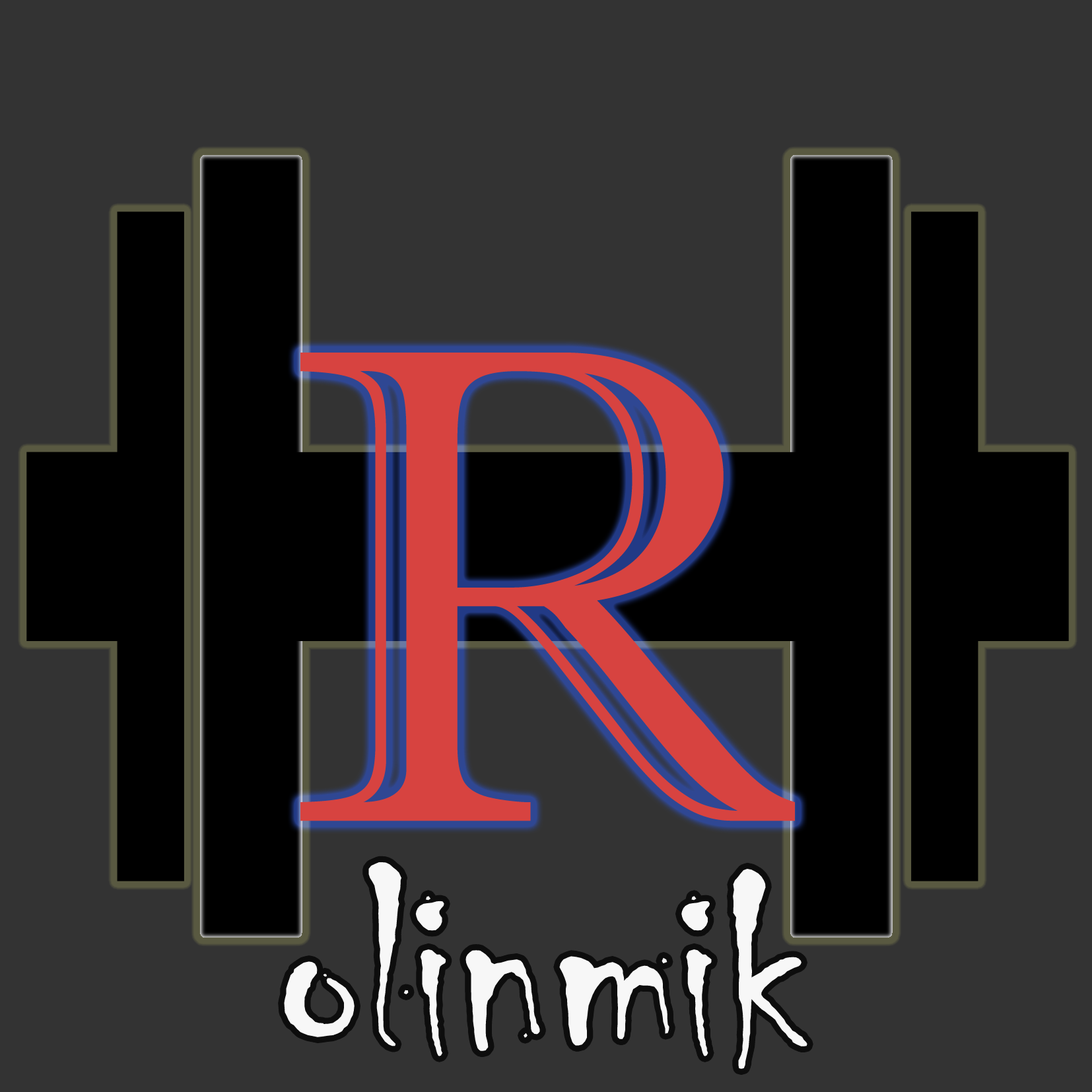
<style>
.page{position:relative;width:1092px;height:1092px;background:#333333}
.page>*{position:absolute;margin:0}
.t1{font:679.5px "ImprintMT-Shadow";color:#d74340}
.t2{font:275.1px "Chiller-Regular";color:#f7f7f7}
</style>
<div class="page">
<p class="t1" style="left:300px;top:353px;width:495px;height:468px">R</p>
<p class="t2" style="left:284px;top:862px;width:523px;height:207px">olinmik</p>
</div>
